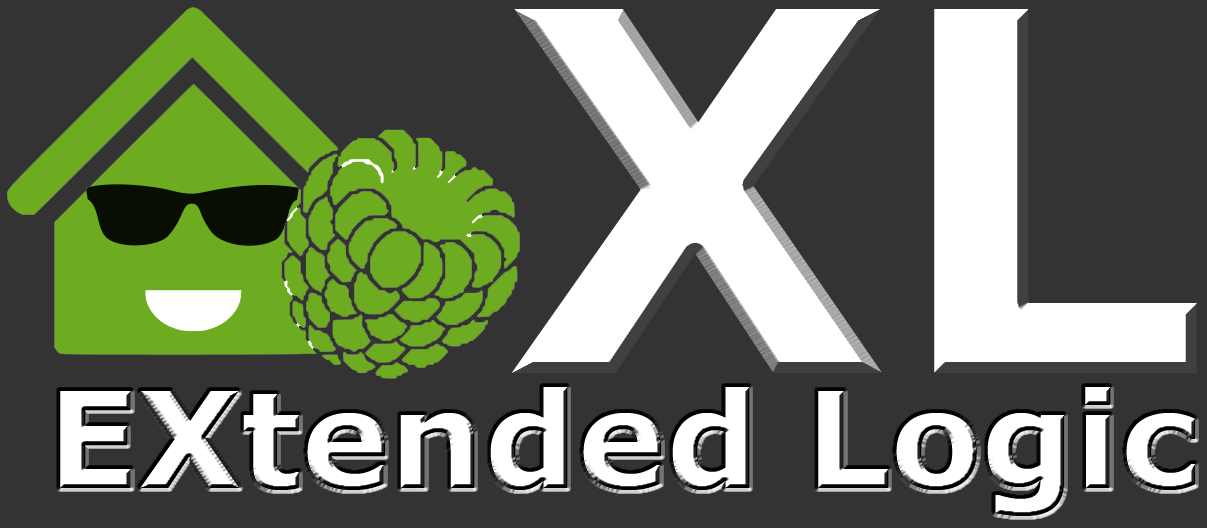
<style>
.page{position:relative;width:1207px;height:528px;background:#333333}
.page>*{position:absolute;margin:0}
.t1{font:500px "Verdana-Bold";color:#ffffff}
.t2{font:133.3px "Verdana-Bold";color:#ffffff}
</style>
<div class="page">
<p class="t1" style="left:511px;top:9px;width:686px;height:364px">XL</p>
<p class="t2" style="left:60px;top:387px;width:1135px;height:129px">EXtended Logic</p>
</div>
